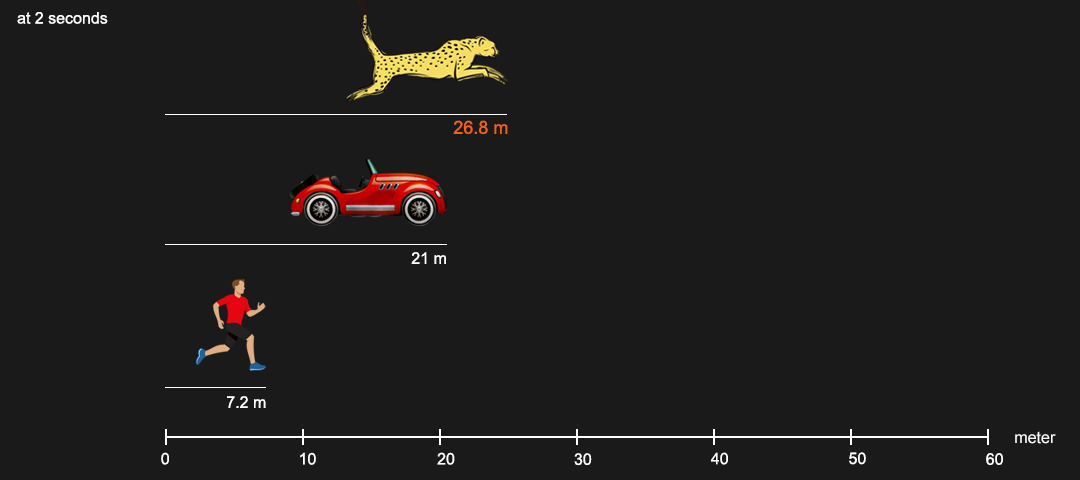
<style>
.page{position:relative;width:1080px;height:480px;background:#1a1a1a}
.page>*{position:absolute;margin:0}
.t1{font:16px "ArialMT";color:#ffffff}
.t2{font:18px "ArialMT";color:#f06215}
</style>
<div class="page">
<p class="t1" style="left:17px;top:12px;width:91px;height:12px">at 2 seconds</p>
<p class="t2" style="left:453px;top:120px;width:55px;height:14px">26.8 m</p>
<p class="t1" style="left:411px;top:252px;width:35px;height:12px">21 m</p>
<p class="t1" style="left:227px;top:396px;width:39px;height:12px">7.2 m</p>
<p class="t1" style="left:1015px;top:431px;width:41px;height:13px">meter</p>
<p class="t1" style="left:161px;top:452px;width:8px;height:13px">0</p>
<p class="t1" style="left:300px;top:452px;width:16px;height:13px">10</p>
<p class="t1" style="left:437px;top:452px;width:18px;height:13px">20</p>
<p class="t1" style="left:574px;top:453px;width:18px;height:13px">30</p>
<p class="t1" style="left:711px;top:452px;width:17px;height:13px">40</p>
<p class="t1" style="left:849px;top:452px;width:17px;height:13px">50</p>
<p class="t1" style="left:986px;top:453px;width:17px;height:12px">60</p>
</div>
